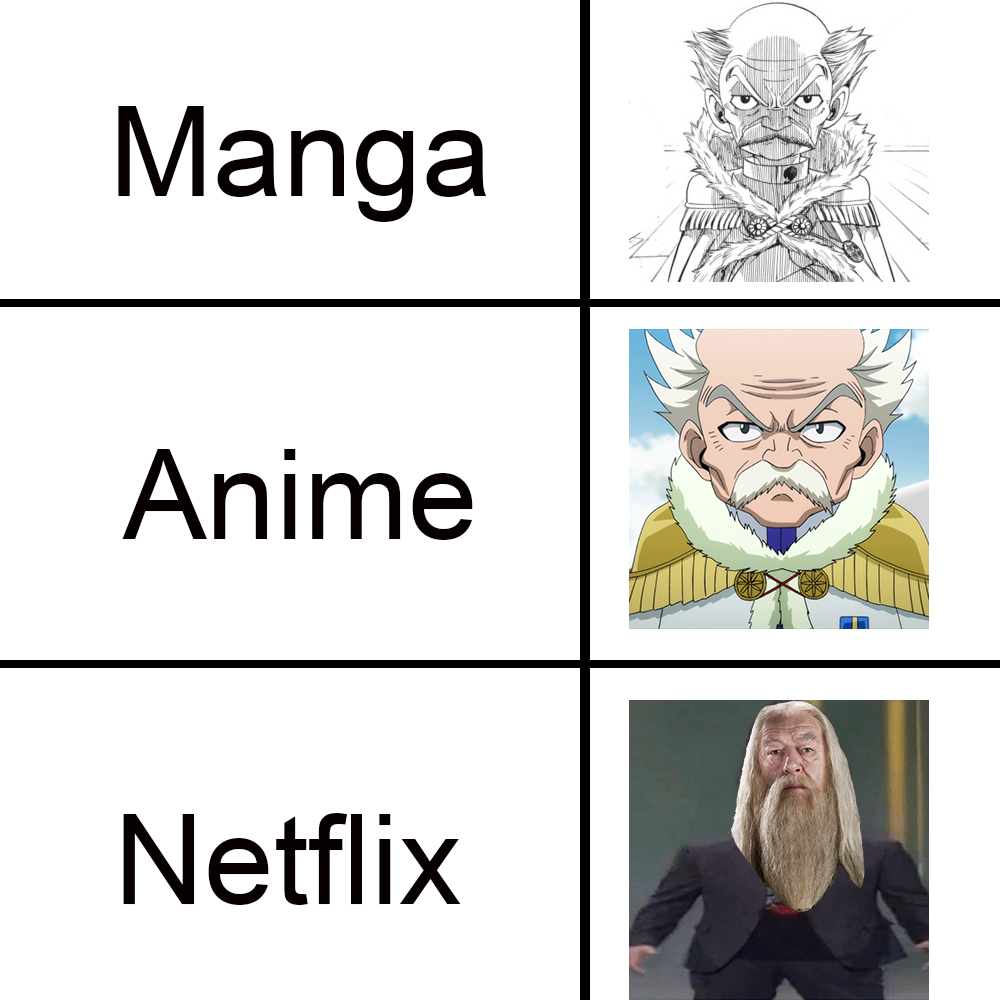
<style>
.page{position:relative;width:1000px;height:1000px;background:#ffffff}
.page>*{position:absolute;margin:0}
.t1{font:125px "ArialMT";color:#070000}
</style>
<div class="page">
<p class="t1" style="left:118px;top:106px;width:369px;height:116px">Manga</p>
<p class="t1" style="left:122px;top:449px;width:351px;height:91px">Anime</p>
<p class="t1" style="left:123px;top:813px;width:338px;height:92px">Netflix</p>
</div>
